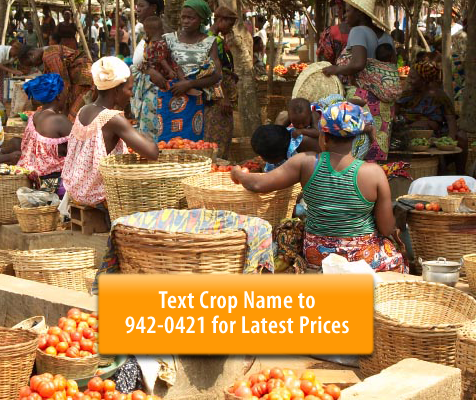
<style>
.page{position:relative;width:476px;height:400px}
.page>*{position:absolute;margin:0}
.t1{font:25px/25px "MyriadPro-SemiboldCond";letter-spacing:0.02em;color:#ffffff}
</style>
<div class="page">
<p class="t1" style="left:125px;top:291px;width:224px;height:43px;text-align:center">Text Crop Name to<br>942-0421 for Latest Prices</p>
</div>
